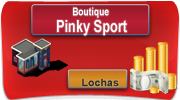
<style>
.page{position:relative;width:180px;height:100px}
.page>*{position:absolute;margin:0}
.t1{font:16.7px/16.7px "Arial-BoldMT";color:#ffffff;scale:0.77 1}
.t2{font:13.9px/16.7px "Arial-BoldMT";color:#ffffff;scale:0.77 1}
.t3{font:11.1px/16.7px "Arial-BoldMT";color:#ffffff;scale:0.77 1}
.t4{font:10.4px "Arial-BoldMT";color:#303030;scale:1.03 1}
.t5{font:20.8px "Arial-BoldMT";color:#303030;scale:1.03 1}
</style>
<div class="page">
<p class="t1" style="left:57px;top:7px;width:70px;height:29px;text-align:center"><span class="t2">                                         </span><span class="t3">Boutique <br></span>       Pinky Sport</p>
<p class="t4" style="left:82px;top:78px;width:37px;height:9px"><span class="t5"><br></span>Lochas</p>
</div>
